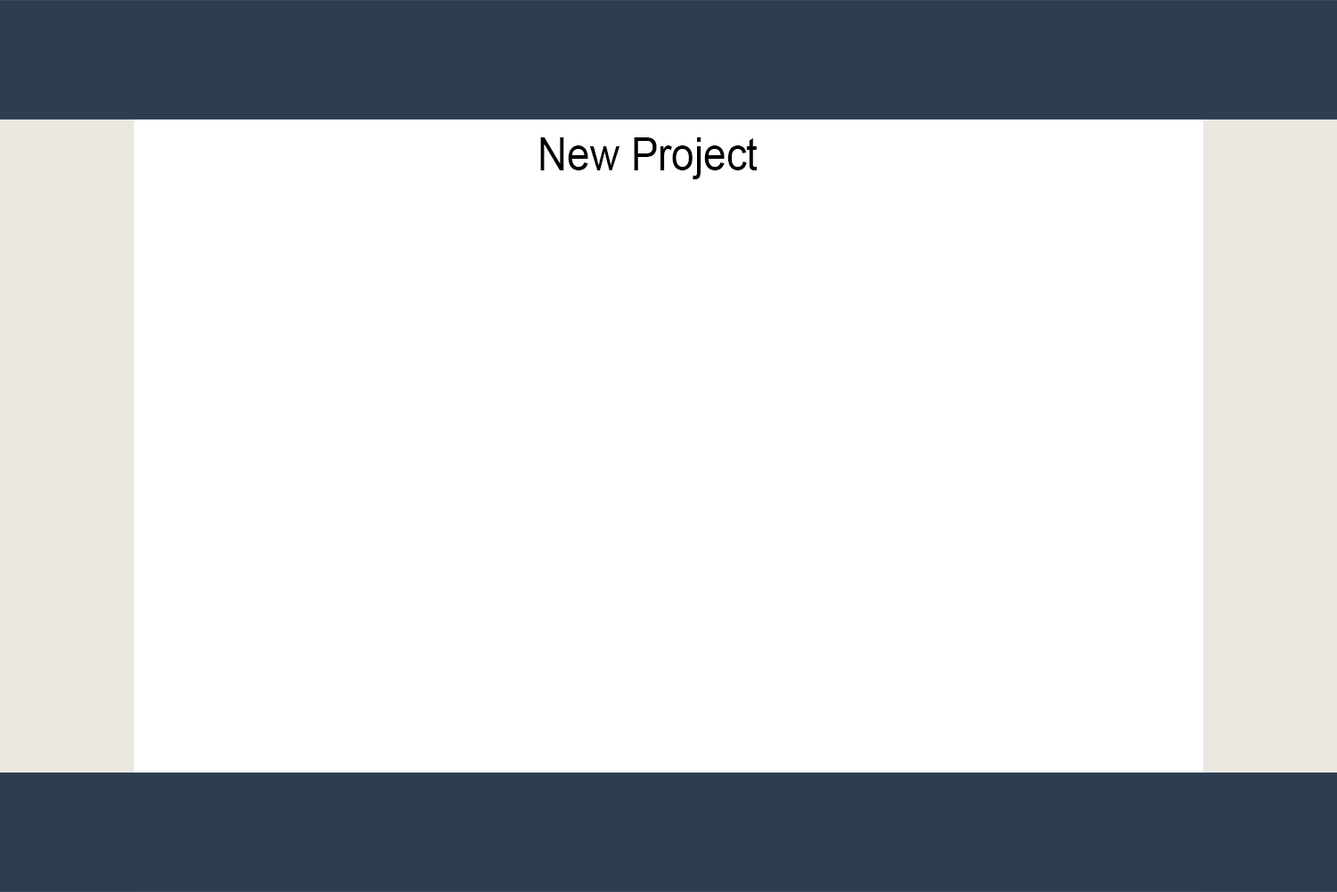
<style>
.page{position:relative;width:1337px;height:892px;background:#ffffff}
.page>*{position:absolute;margin:0}
.t1{font:45.4px "ArialMT";color:#000000;scale:0.9 1}
</style>
<div class="page">
<p class="t1" style="left:540px;top:137px;width:218px;height:42px">New Project</p>
</div>
